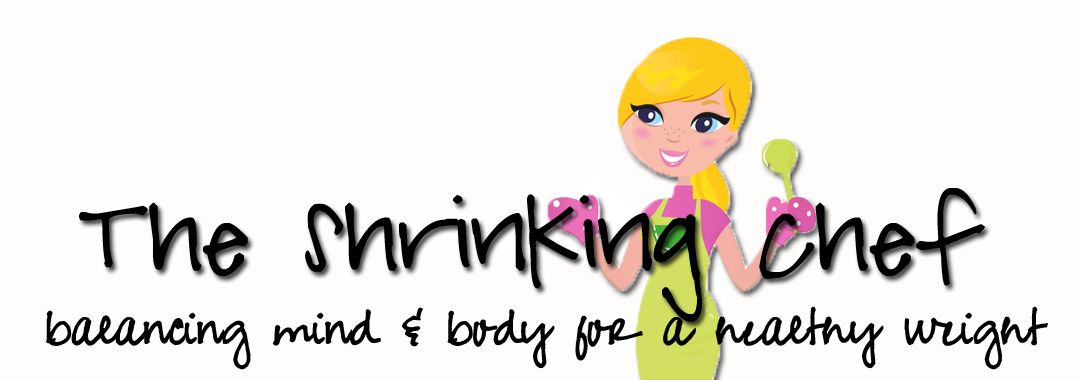
<style>
.page{position:relative;width:1080px;height:380px;background:#fefdfc}
.page>*{position:absolute;margin:0}
.t1{font:95px "PeaMushi";color:#000000}
.t2{font:28px "PeaJeanScript";color:#000000}
</style>
<div class="page">
<p class="t1" style="left:79px;top:188px;width:907px;height:134px">The Shrinking Chef</p>
<p class="t2" style="left:46px;top:306px;width:1002px;height:64px">balancing mind &amp; body for a healthy weight</p>
</div>
